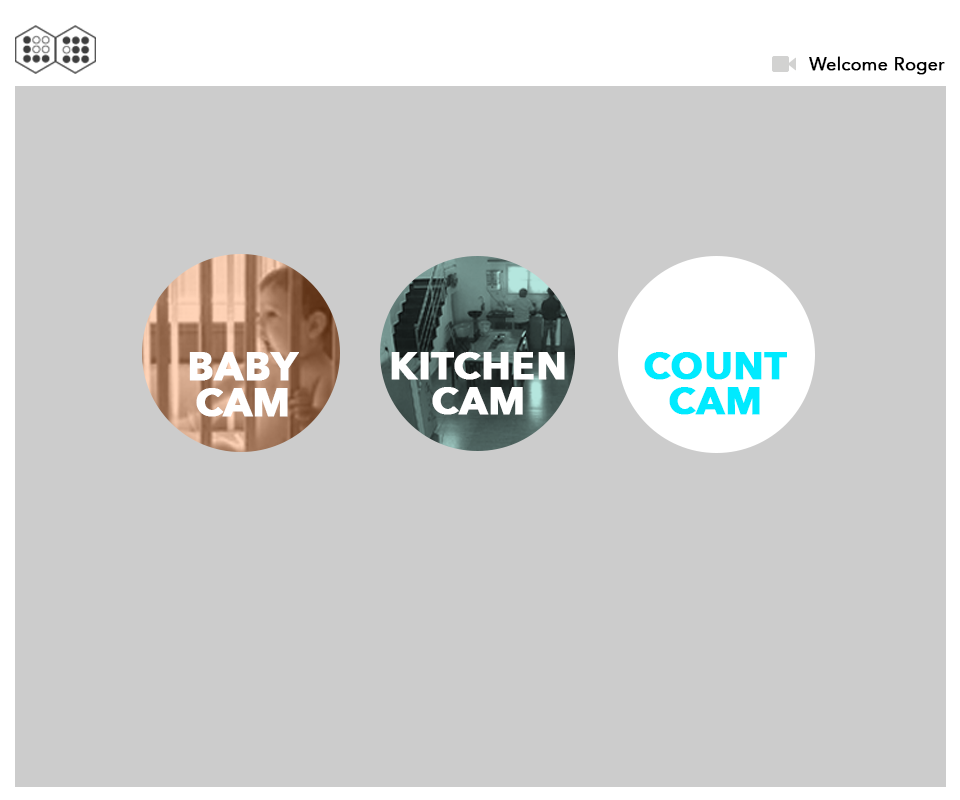
<style>
.page{position:relative;width:960px;height:800px;background:#cccccc}
.page>*{position:absolute;margin:0}
.t1{font:18px "Avenir-Roman";color:#000000;font-weight:bold}
.t2{font:39.1px/36.5px "AvenirNext-Bold";color:#ffffff;font-weight:bold}
.t3{font:38.5px/35.9px "AvenirNext-Bold";color:#ffffff;font-weight:bold}
.t4{font:38.5px/35.9px "AvenirNext-Bold";color:#00eaff;font-weight:bold}
</style>
<div class="page">
<p class="t1" style="left:809px;top:56px;width:136px;height:19px">Welcome Roger</p>
<p class="t2" style="left:189px;top:352px;width:110px;height:65px;text-align:center">BABY<br>CAM</p>
<p class="t3" style="left:391px;top:352px;width:174px;height:63px;text-align:center">KITCHEN<br>CAM</p>
<p class="t4" style="left:644px;top:352px;width:143px;height:63px;text-align:center">COUNT<br>CAM</p>
</div>
